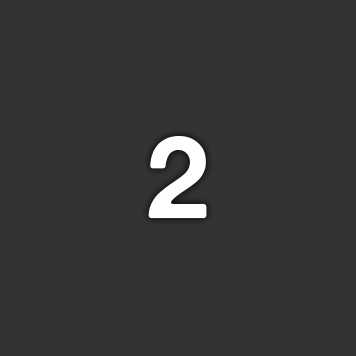
<style>
.page{position:relative;width:356px;height:356px;background:#333333}
.page>*{position:absolute;margin:0}
.t1{font:115.3px "AlteHaasGrotesk_Bold";letter-spacing:0.14em;color:#ffffff}
</style>
<div class="page">
<p class="t1" style="left:148px;top:136px;width:59px;height:83px">2</p>
</div>
